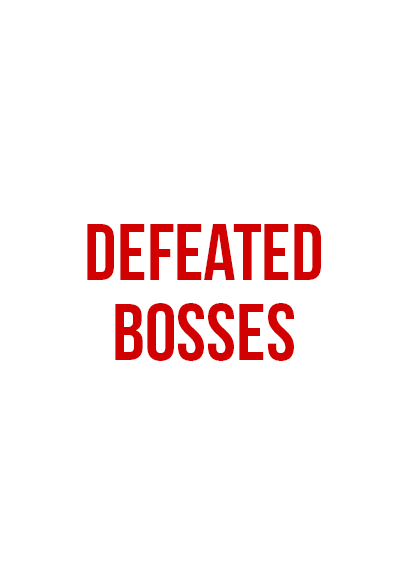
<style>
.page{position:relative;width:408px;height:585px;background:#ffffff}
.page>*{position:absolute;margin:0}
.t1{font:80px/80px "BebasNeue";color:#d20101}
</style>
<div class="page">
<p class="t1" style="left:87px;top:224px;width:234px;height:137px;text-align:center">defeated<br>bosses</p>
</div>
